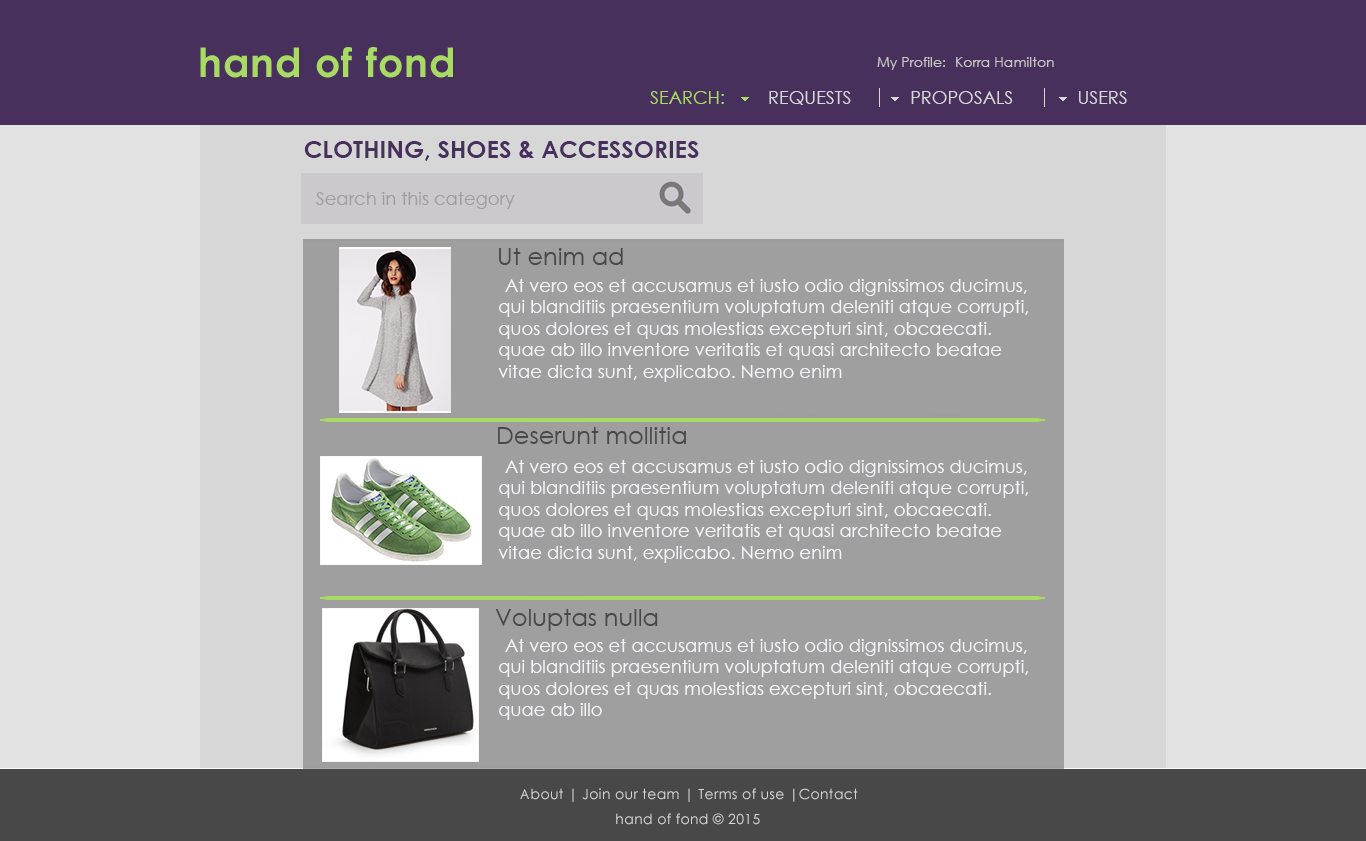
<style>
.page{position:relative;width:1366px;height:841px;background:#9f9f9f}
.page>*{position:absolute;margin:0}
.t1{font:14px "CenturyGothic";color:#c9c5c4}
.t2{font:18px "CenturyGothic";color:#a9da63}
.t3{font:18px "CenturyGothic";color:#d7d7d7}
.t4{font:24px "CenturyGothic-Bold";color:#47315c}
.t5{font:18px "CenturyGothic";color:#9f9f9f}
.t6{font:24px "CenturyGothic";color:#484848}
.t7{font:24px "CenturyGothic-Bold";color:#7a7a7a}
.t8{font:18px "CenturyGothic";color:#f6f4f8}
.t9{font:24px "CenturyGothic";color:#f6f4f8}
.t10{font:14px "CenturyGothic";letter-spacing:0.025em;color:#d7d7d7}
</style>
<div class="page">
<p class="t1" style="left:877px;top:57px;width:68px;height:13px">My Profile:</p>
<p class="t1" style="left:956px;top:57px;width:98px;height:10px">Korra Hamilton</p>
<p class="t2" style="left:650px;top:91px;width:74px;height:13px">SEARCH:</p>
<p class="t3" style="left:769px;top:91px;width:82px;height:14px">REQUESTS</p>
<p class="t3" style="left:911px;top:91px;width:102px;height:13px">PROPOSALS</p>
<p class="t3" style="left:1079px;top:91px;width:48px;height:13px">USERS</p>
<p class="t4" style="left:304px;top:141px;width:395px;height:20px">CLOTHING, SHOES &amp; ACCESSORIES</p>
<p class="t5" style="left:316px;top:192px;width:199px;height:17px">Search in this category</p>
<p class="t6" style="left:499px;top:248px;width:124px;height:17px"><span class="t7"> </span>Ut enim ad</p>
<p class="t8" style="left:498px;top:279px;width:531px;height:103px"><span class="t9"> </span>At vero eos et accusamus et iusto odio dignissimos ducimus, <br>qui blanditiis praesentium voluptatum deleniti atque corrupti, <br>quos dolores et quas molestias excepturi sint, obcaecati.  <br>quae ab illo inventore veritatis et quasi architecto beatae <br>vitae dicta sunt, explicabo. Nemo enim</p>
<p class="t6" style="left:498px;top:427px;width:188px;height:17px"><span class="t7"> </span>Deserunt mollitia</p>
<p class="t8" style="left:498px;top:460px;width:531px;height:103px"><span class="t9"> </span>At vero eos et accusamus et iusto odio dignissimos ducimus, <br>qui blanditiis praesentium voluptatum deleniti atque corrupti, <br>quos dolores et quas molestias excepturi sint, obcaecati.  <br>quae ab illo inventore veritatis et quasi architecto beatae <br>vitae dicta sunt, explicabo. Nemo enim</p>
<p class="t6" style="left:495px;top:609px;width:163px;height:22px"><span class="t7"> </span>Voluptas nulla</p>
<p class="t8" style="left:499px;top:639px;width:530px;height:81px"><span class="t9"> </span>At vero eos et accusamus et iusto odio dignissimos ducimus, <br>qui blanditiis praesentium voluptatum deleniti atque corrupti, <br>quos dolores et quas molestias excepturi sint, obcaecati.  <br>quae ab illo</p>
<p class="t10" style="left:520px;top:788px;width:338px;height:14px">About | Join our team | Terms of use |Contact</p>
<p class="t10" style="left:616px;top:813px;width:144px;height:12px">hand of fond © 2015</p>
</div>
